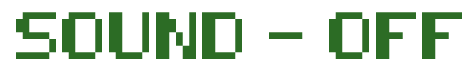
<style>
.page{position:relative;width:475px;height:69px;background:#ffffff}
.page>*{position:absolute;margin:0}
.t1{font:40px "8-bit-pusab";color:#2c6c25}
</style>
<div class="page">
<p class="t1" style="left:16px;top:12px;width:446px;height:47px">SOUND - OFF</p>
</div>
